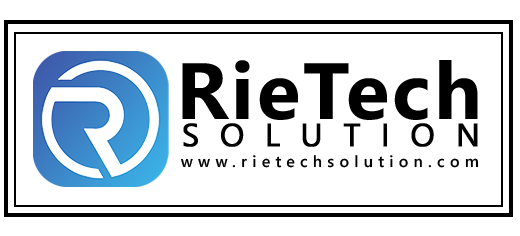
<style>
.page{position:relative;width:520px;height:236px;background:#ffffff}
.page>*{position:absolute;margin:0}
.t1{font:79.8px "SegoeUI-Bold";letter-spacing:0.04em;color:#000000}
.t2{font:31.9px "SegoeUI";letter-spacing:0.633em;color:#000000;font-weight:bold}
.t3{font:16px "SegoeUI-Semibold";letter-spacing:0.33em;color:#000000}
</style>
<div class="page">
<p class="t1" style="left:182px;top:60px;width:296px;height:60px">RieTech</p>
<p class="t2" style="left:183px;top:123px;width:295px;height:24px">SOLUTION</p>
<p class="t3" style="left:181px;top:155px;width:298px;height:13px">www.rietechsolution.com</p>
</div>
